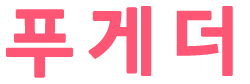
<style>
.page{position:relative;width:250px;height:84px;background:#ffffff}
.page>*{position:absolute;margin:0}
.t1{font:77.3px "JejuGothic";letter-spacing:0.12em;color:#ff5675;font-weight:bold}
</style>
<div class="page">
<p class="t1" style="left:6px;top:6px;width:227px;height:72px">푸게더</p>
</div>
